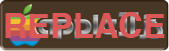
<style>
.page{position:relative;width:169px;height:51px;background:#493726}
.page>*{position:absolute;margin:0}
.t1{font:34px "Helvetica-Bold";color:#db5858}
</style>
<div class="page">
<p class="t1" style="left:5px;top:12px;width:160px;height:26px">REPLACE</p>
</div>
